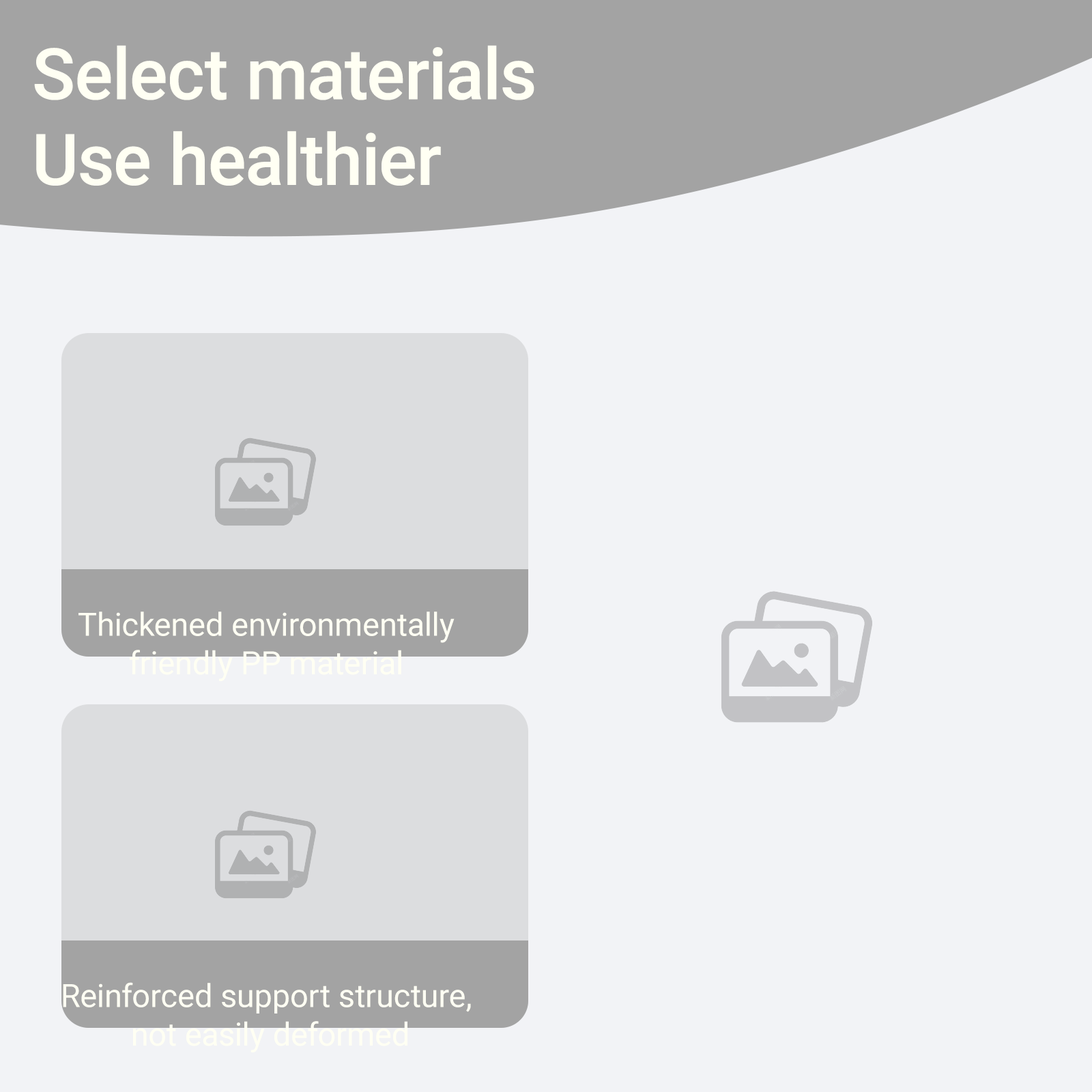
<style>
.page{position:relative;width:1092px;height:1092px;background:#f2f3f6}
.page>*{position:absolute;margin:0}
.t1{font:71.3px "Roboto-Medium";color:#fffff3}
.t2{font:32px "Roboto-Regular";color:#fffff3}
</style>
<div class="page">
<p class="t1" style="left:34px;top:45px;width:500px;height:141px">Select materials<br>Use healthier</p>
<p class="t2" style="left:78px;top:612px;width:377px;height:69px;text-align:center">Thickened environmentally<br>friendly PP material</p>
<p class="t2" style="left:63px;top:982px;width:408px;height:70px;text-align:center">Reinforced support structure, <br>not easily deformed</p>
</div>
